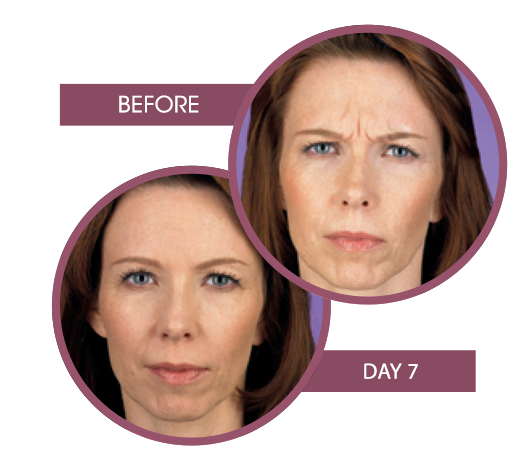
<style>
.page{position:relative;width:511px;height:467px;background:#ffffff}
.page>*{position:absolute;margin:0}
.t1{font:22.2px "ITCAvantGardeStd-Bk";letter-spacing:0.02em;color:#ffffff}
</style>
<div class="page">
<p class="t1" style="left:119px;top:95px;width:80px;height:18px">BEFORE</p>
<p class="t1" style="left:364px;top:363px;width:54px;height:16px">DAY 7</p>
</div>
